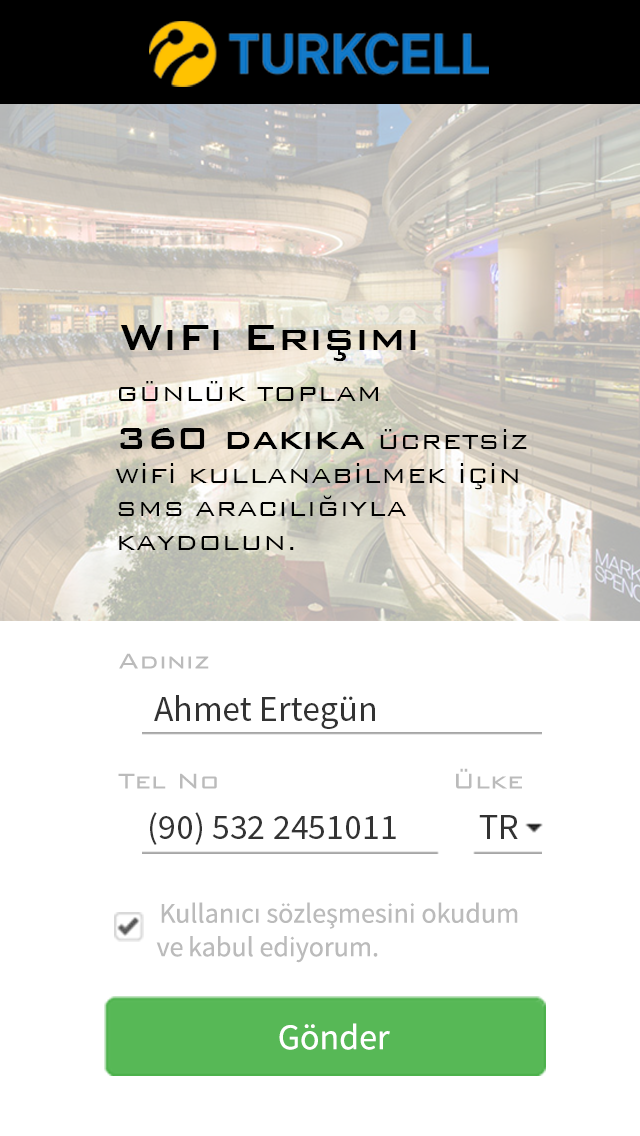
<style>
.page{position:relative;width:640px;height:1136px;background:#ffffff}
.page>*{position:absolute;margin:0}
.t1{font:48px "BankGothic-Medium";color:#000000}
.t2{font:28px "BankGothic-Light";color:#000000}
.t3{font:40px "BankGothic-Medium";color:#000000}
.t4{font:28px "BankGothic-Light";color:#bbbbbb}
.t5{font:36px "SourceSansPro-Regular";color:#333333}
.t6{font:28px "SourceSansPro-Regular";color:#bbbbbb}
.t7{font:36px "SourceSansPro-Regular";color:#ffffff}
</style>
<div class="page">
<p class="t1" style="left:120px;top:325px;width:296px;height:36px">WiFi Erişimi</p>
<p class="t2" style="left:115px;top:381px;width:412px;height:169px">GÜNLÜK TOPLAM<br><span class="t3">360 dakika </span>ÜCRETSİZ<br>WİFİ KULLANABİLMEK İÇİN<br>SMS ARACILIĞIYLA<br>KAYDOLUN.</p>
<p class="t4" style="left:119px;top:653px;width:90px;height:16px">Adınız</p>
<p class="t5" style="left:154px;top:695px;width:221px;height:34px">Ahmet Ertegün</p>
<p class="t4" style="left:118px;top:773px;width:99px;height:16px">Tel No</p>
<p class="t4" style="left:456px;top:768px;width:66px;height:21px">Ülke</p>
<p class="t5" style="left:150px;top:812px;width:246px;height:33px">(90) 532 2451011</p>
<p class="t5" style="left:479px;top:815px;width:39px;height:24px">TR</p>
<p class="t6" style="left:156px;top:902px;width:362px;height:61px">Kullanıcı sözleşmesini okudum<br>ve kabul ediyorum.</p>
<p class="t7" style="left:279px;top:1023px;width:111px;height:27px">Gönder</p>
</div>
